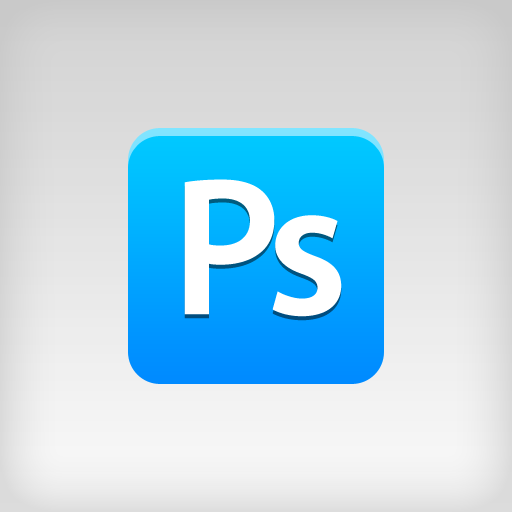
<style>
.page{position:relative;width:512px;height:512px}
.page>*{position:absolute;margin:0}
.t1{font:198px "MyriadPro-Semibold";letter-spacing:-0.08em;color:#ffffff}
</style>
<div class="page">
<p class="t1" style="left:184px;top:179px;width:158px;height:138px">Ps</p>
</div>
